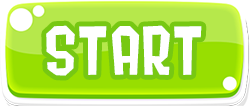
<style>
.page{position:relative;width:250px;height:106px;background:#ffffff}
.page>*{position:absolute;margin:0}
.t1{font:66.7px "Splat2K";letter-spacing:0.01em;color:#ffffff}
</style>
<div class="page">
<p class="t1" style="left:46px;top:25px;width:156px;height:51px">START</p>
</div>
